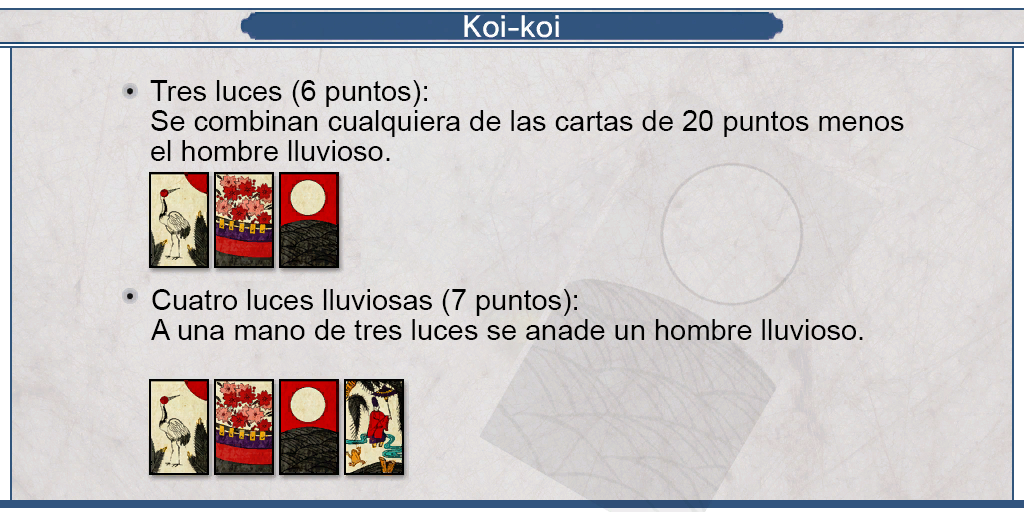
<style>
.page{position:relative;width:1024px;height:512px}
.page>*{position:absolute;margin:0}
.t1{font:29px/30px "ArialMT";color:#000000}
</style>
<div class="page">
<p class="t1" style="left:150px;top:80px;width:754px;height:81px;text-align:justify">Tres luces (6 puntos):<br>Se combinan cualquiera de las cartas de 20 puntos menos <br>el hombre lluvioso.</p>
<p class="t1" style="left:151px;top:289px;width:712px;height:51px;text-align:justify">Cuatro luces lluviosas (7 puntos):<br>A una mano de tres luces se anade un hombre lluvioso.</p>
</div>
